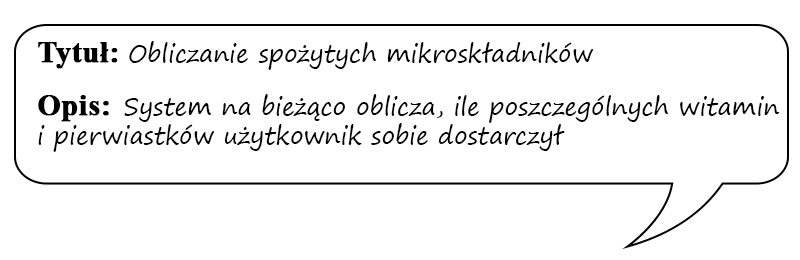
<style>
.page{position:relative;width:800px;height:260px;background:#ffffff}
.page>*{position:absolute;margin:0}
.t1{font:24px "SegoePrint";color:#000000}
.t2{font:30px "TimesNewRomanPS-BoldMT";color:#000000;font-weight:bold}
</style>
<div class="page">
<p class="t1" style="left:38px;top:41px;width:742px;height:111px"><span class="t2">Tytuł: </span>Obliczanie spożytych mikroskładników<br><br><span class="t2">Opis:  </span>System na bieżąco oblicza, ile poszczególnych witamin i pierwiastków użytkownik sobie dostarczył</p>
</div>
